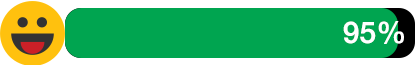
<style>
.page{position:relative;width:415px;height:65px;background:#00a550}
.page>*{position:absolute;margin:0}
.t1{font:30px "HelveticaNeueCyr-Medium";color:#ffffff}
</style>
<div class="page">
<p class="t1" style="left:343px;top:21px;width:61px;height:23px">95%</p>
</div>
